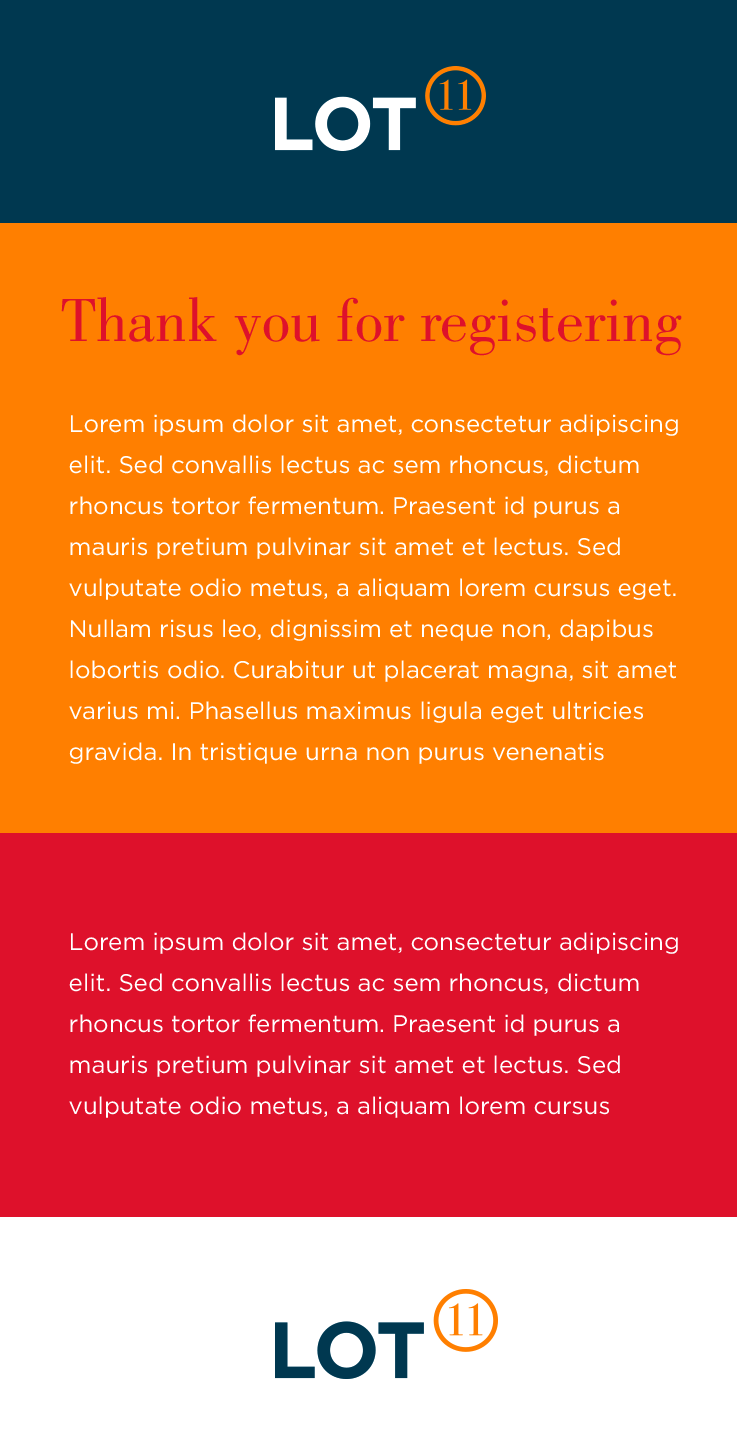
<style>
.page{position:relative;width:737px;height:1456px;background:#ff7f00}
.page>*{position:absolute;margin:0}
.t1{font:63px "BodoniStd-Book";color:#de112b}
.t2{font:24px/41px "Gotham-Book";color:#ffffff}
</style>
<div class="page">
<p class="t1" style="left:61px;top:297px;width:621px;height:59px">Thank you for registering</p>
<p class="t2" style="left:69px;top:414px;width:609px;height:350px">Lorem ipsum dolor sit amet, consectetur adipiscing elit. Sed convallis lectus ac sem rhoncus, dictum rhoncus tortor fermentum. Praesent id purus a mauris pretium pulvinar sit amet et lectus. Sed vulputate odio metus, a aliquam lorem cursus eget. Nullam risus leo, dignissim et neque non, dapibus lobortis odio. Curabitur ut placerat magna, sit amet varius mi. Phasellus maximus ligula eget ultricies gravida. In tristique urna non purus venenatis sodales. Aenean quam elit, aliquam eget porta semper, mollis id nisl.</p>
<p class="t2" style="left:69px;top:932px;width:609px;height:186px">Lorem ipsum dolor sit amet, consectetur adipiscing elit. Sed convallis lectus ac sem rhoncus, dictum rhoncus tortor fermentum. Praesent id purus a mauris pretium pulvinar sit amet et lectus. Sed vulputate odio metus, a aliquam lorem cursus</p>
</div>
